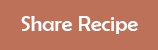
<style>
.page{position:relative;width:158px;height:50px;background:#bd7158}
.page>*{position:absolute;margin:0}
.t1{font:22px "BerlinSansFB-Reg";color:#ffffff}
</style>
<div class="page">
<p class="t1" style="left:21px;top:16px;width:117px;height:18px">Share Recipe</p>
</div>
